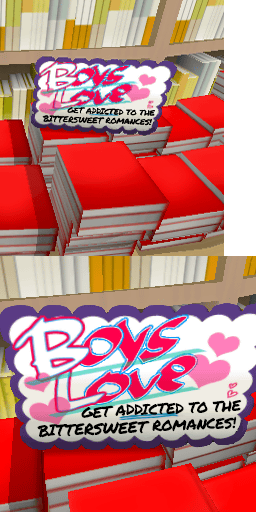
<style>
.page{position:relative;width:256px;height:512px}
.page>*{position:absolute;margin:0}
.t1{font:15px/18px "PermanentMarker";letter-spacing:-0.025em;color:#000000;text-transform:uppercase}
.t2{font:16px/18px "PermanentMarker";letter-spacing:-0.025em;color:#000000;text-transform:uppercase}
</style>
<div class="page">
<p class="t1" style="left:37px;top:399px;width:205px;height:39px;rotate:-2deg"><span class="t2">    </span>get addicted to the<br>  <span class="t2">bittersweet </span>romances!</p>
</div>
